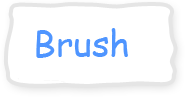
<style>
.page{position:relative;width:186px;height:98px;background:#ffffff}
.page>*{position:absolute;margin:0}
.t1{font:36px "ComicSansMS";color:#4f95ff}
</style>
<div class="page">
<p class="t1" style="left:36px;top:28px;width:92px;height:30px">Brush</p>
</div>
